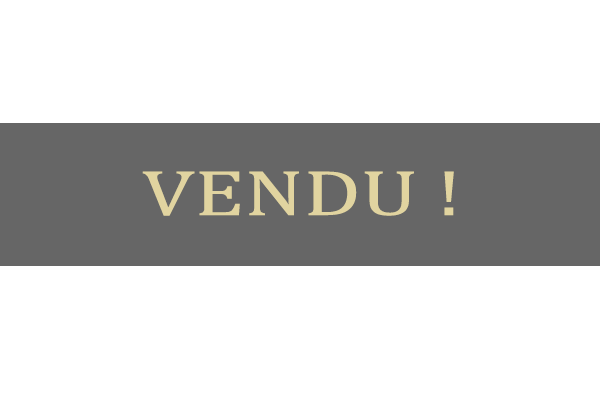
<style>
.page{position:relative;width:600px;height:400px;background:#ffffff}
.page>*{position:absolute;margin:0}
.t1{font:65px "CambriaMath";color:#e1d4a0;scale:1.34 1}
</style>
<div class="page">
<p class="t1" style="left:142px;top:171px;width:312px;height:45px">VENDU !</p>
</div>
